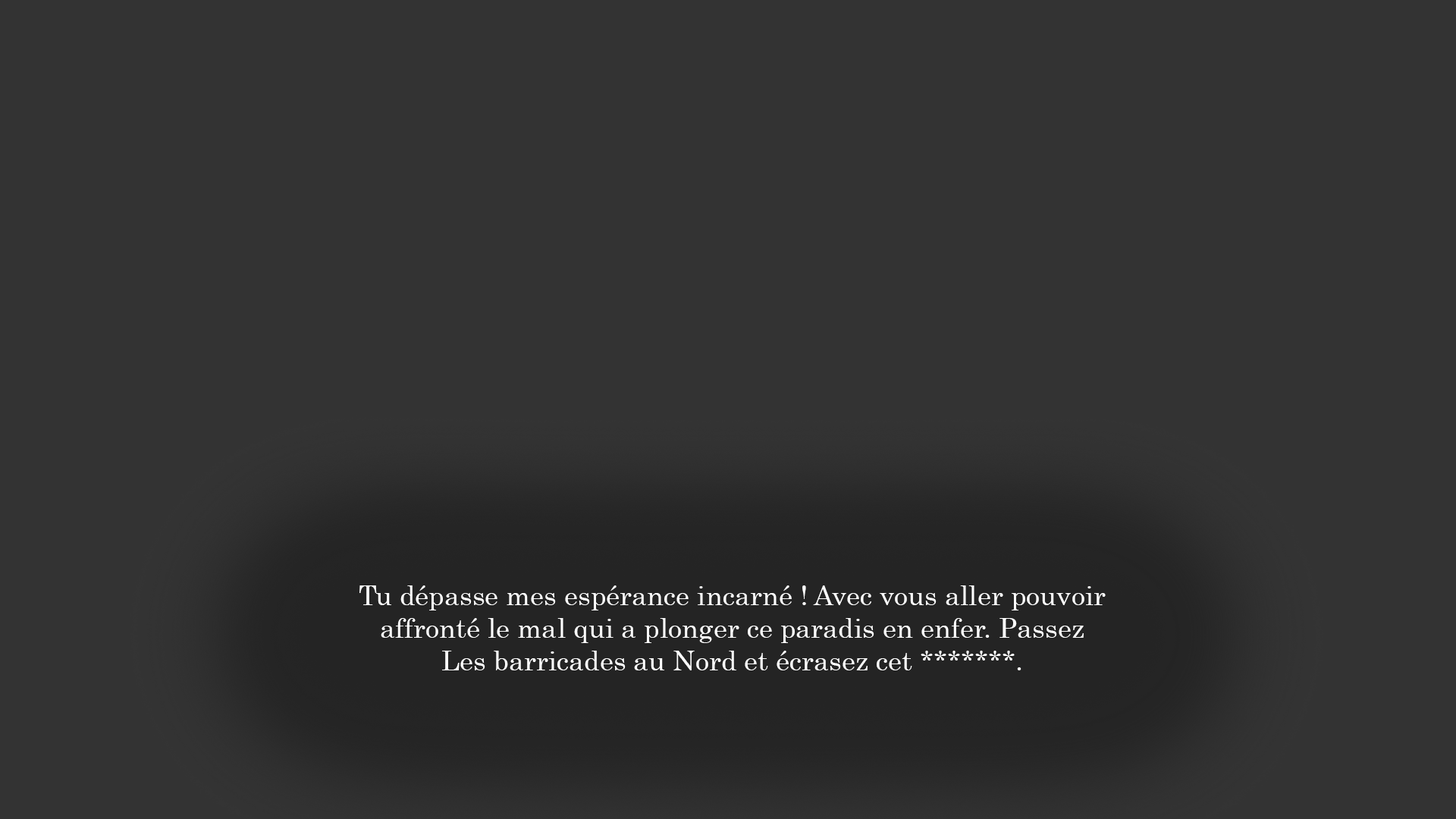
<style>
.page{position:relative;width:1456px;height:819px;background:#333333}
.page>*{position:absolute;margin:0}
.t1{font:27.3px "Century";color:#ffffff}
</style>
<div class="page">
<p class="t1" style="left:359px;top:585px;width:747px;height:85px;text-align:center">Tu dépasse mes espérance incarné ! Avec vous aller pouvoir<br>affronté le mal qui a plonger ce paradis en enfer. Passez<br>Les barricades au Nord et écrasez cet *******.</p>
</div>
